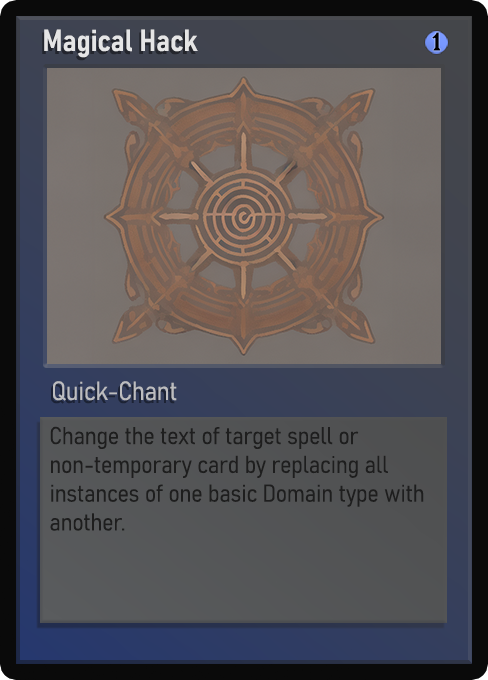
<style>
.page{position:relative;width:488px;height:680px}
.page>*{position:absolute;margin:0}
.t1{font:30px "Bahnschrift-SemiBoldSemiCondensed";color:#f2f2f2;font-weight:bold}
.t2{font:25px "WTRRoycroft";color:#000000;font-weight:bold;scale:1.09 1}
.t3{font:26px "Bahnschrift-LightSemiCondensed";color:#c8c8c8;font-weight:bold}
.t4{font:24px "Bahnschrift-LightSemiCondensed";color:#1e1e1e;font-weight:bold}
</style>
<div class="page">
<p class="t1" style="left:44px;top:29px;width:154px;height:29px;opacity:0.9">Magical Hack</p>
<p class="t2" style="left:432px;top:32px;width:9px;height:19px">1</p>
<p class="t3" style="left:53px;top:381px;width:124px;height:20px;opacity:0.9">Quick-Chant</p>
<p class="t4" style="left:50px;top:426px;width:374px;height:105px">Change the text of target spell or non-temporary card by replacing all instances of one basic Domain type with another.</p>
</div>
